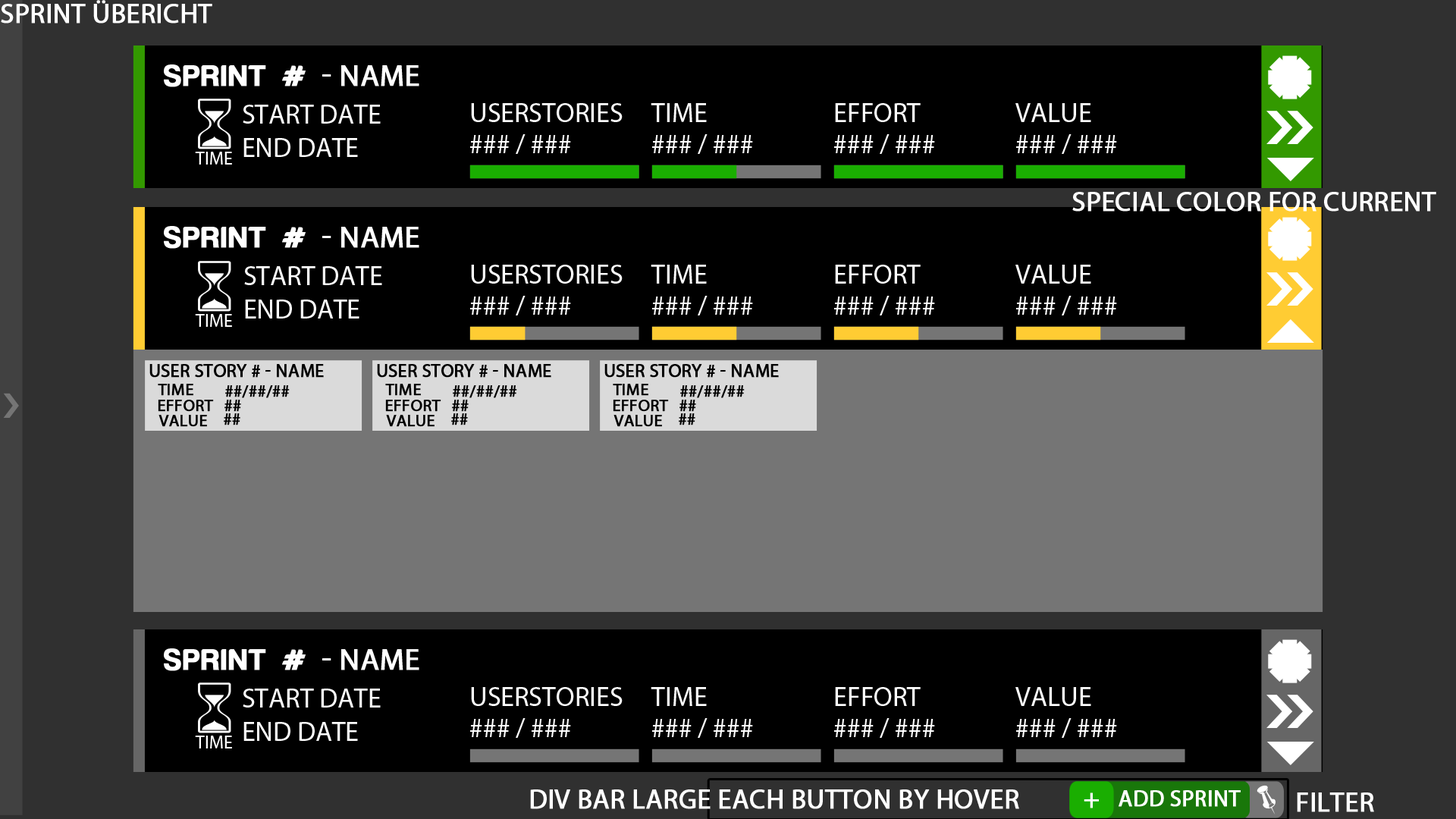
<style>
.page{position:relative;width:1456px;height:819px;background:#000000}
.page>*{position:absolute;margin:0}
.t1{font:27.3px "MyriadPro-Regular";color:#ffffff;text-transform:uppercase;font-weight:bold}
.t2{font:30.3px "HarabaraMaisBold-HarabaraMaisBold";color:#ffffff;text-transform:uppercase;font-weight:bold}
.t3{font:30.3px "MyriadPro-Regular";color:#ffffff;text-transform:uppercase;font-weight:bold}
.t4{font:27.3px/24.8px "MyriadPro-Regular";color:#ffffff;text-transform:uppercase}
.t5{font:27.3px "MyriadPro-Regular";color:#ffffff;text-transform:uppercase}
.t6{font:18.2px "MyriadPro-Regular";color:#ffffff;text-transform:uppercase}
.t7{font:18.2px "MyriadPro-Regular";color:#000000;text-transform:uppercase;font-weight:bold}
.t8{font:16.7px "MyriadPro-Regular";color:#000000;text-transform:uppercase;font-weight:bold}
.t9{font:22.7px "MyriadPro-Regular";color:#ffffff;text-transform:uppercase;font-weight:bold}
</style>
<div class="page">
<p class="t1" style="left:1px;top:0px;width:211px;height:24px">Sprint übericht</p>
<p class="t2" style="left:164px;top:64px;width:255px;height:23px">Sprint # <span class="t3">- Name</span></p>
<p class="t4" style="left:243px;top:105px;width:138px;height:52px">start Date<br>End Date</p>
<p class="t5" style="left:471px;top:103px;width:152px;height:19px">UserStories</p>
<p class="t5" style="left:651px;top:103px;width:56px;height:19px">time</p>
<p class="t5" style="left:835px;top:103px;width:86px;height:19px">Effort</p>
<p class="t5" style="left:1015px;top:103px;width:76px;height:19px">Value</p>
<p class="t5" style="left:470px;top:134px;width:101px;height:20px">### / ###</p>
<p class="t5" style="left:652px;top:134px;width:101px;height:20px">### / ###</p>
<p class="t5" style="left:834px;top:134px;width:101px;height:20px">### / ###</p>
<p class="t5" style="left:1016px;top:134px;width:101px;height:20px">### / ###</p>
<p class="t6" style="left:195px;top:152px;width:37px;height:13px">time</p>
<p class="t1" style="left:1072px;top:192px;width:364px;height:20px">Special color for current</p>
<p class="t2" style="left:164px;top:226px;width:255px;height:23px">Sprint # <span class="t3">- Name</span></p>
<p class="t4" style="left:244px;top:266px;width:138px;height:52px">start Date<br>End Date</p>
<p class="t5" style="left:471px;top:265px;width:152px;height:19px">UserStories</p>
<p class="t5" style="left:651px;top:265px;width:56px;height:19px">time</p>
<p class="t5" style="left:835px;top:265px;width:86px;height:19px">Effort</p>
<p class="t5" style="left:1015px;top:265px;width:76px;height:19px">Value</p>
<p class="t5" style="left:470px;top:296px;width:101px;height:19px">### / ###</p>
<p class="t5" style="left:652px;top:296px;width:101px;height:19px">### / ###</p>
<p class="t5" style="left:834px;top:296px;width:101px;height:19px">### / ###</p>
<p class="t5" style="left:1016px;top:296px;width:101px;height:19px">### / ###</p>
<p class="t6" style="left:195px;top:314px;width:37px;height:13px">time</p>
<p class="t7" style="left:149px;top:364px;width:175px;height:14px">User sTory # - name</p>
<p class="t7" style="left:377px;top:364px;width:174px;height:14px">User sTory # - name</p>
<p class="t7" style="left:604px;top:364px;width:175px;height:14px">User sTory # - name</p>
<p class="t8" style="left:158px;top:384px;width:35px;height:12px">Time</p>
<p class="t8" style="left:225px;top:385px;width:65px;height:13px">##/##/##</p>
<p class="t8" style="left:385px;top:384px;width:36px;height:12px">Time</p>
<p class="t8" style="left:453px;top:385px;width:64px;height:13px">##/##/##</p>
<p class="t8" style="left:613px;top:384px;width:35px;height:12px">Time</p>
<p class="t8" style="left:680px;top:385px;width:65px;height:13px">##/##/##</p>
<p class="t8" style="left:158px;top:400px;width:56px;height:12px">Effort</p>
<p class="t8" style="left:224px;top:400px;width:17px;height:12px">##</p>
<p class="t8" style="left:385px;top:400px;width:56px;height:12px">Effort</p>
<p class="t8" style="left:452px;top:400px;width:17px;height:12px">##</p>
<p class="t8" style="left:613px;top:400px;width:56px;height:12px">Effort</p>
<p class="t8" style="left:679px;top:400px;width:17px;height:12px">##</p>
<p class="t8" style="left:224px;top:413px;width:16px;height:12px">##</p>
<p class="t8" style="left:451px;top:413px;width:17px;height:12px">##</p>
<p class="t8" style="left:679px;top:413px;width:16px;height:12px">##</p>
<p class="t8" style="left:158px;top:415px;width:49px;height:12px">Value</p>
<p class="t8" style="left:386px;top:415px;width:49px;height:12px">Value</p>
<p class="t8" style="left:613px;top:415px;width:49px;height:12px">Value</p>
<p class="t2" style="left:164px;top:648px;width:255px;height:23px">Sprint # <span class="t3">- Name</span></p>
<p class="t4" style="left:243px;top:689px;width:138px;height:52px">start Date<br>End Date</p>
<p class="t5" style="left:471px;top:687px;width:152px;height:19px">UserStories</p>
<p class="t5" style="left:651px;top:687px;width:56px;height:19px">time</p>
<p class="t5" style="left:835px;top:687px;width:86px;height:19px">Effort</p>
<p class="t5" style="left:1015px;top:687px;width:76px;height:19px">Value</p>
<p class="t5" style="left:470px;top:718px;width:101px;height:20px">### / ###</p>
<p class="t5" style="left:652px;top:718px;width:101px;height:20px">### / ###</p>
<p class="t5" style="left:834px;top:718px;width:101px;height:20px">### / ###</p>
<p class="t5" style="left:1016px;top:718px;width:101px;height:20px">### / ###</p>
<p class="t6" style="left:195px;top:736px;width:37px;height:12px">time</p>
<p class="t1" style="left:530px;top:789px;width:489px;height:20px">DIV Bar large each button by hover</p>
<p class="t1" style="left:1084px;top:792px;width:15px;height:16px">+</p>
<p class="t9" style="left:1119px;top:790px;width:122px;height:17px">add Sprint</p>
<p class="t1" style="left:1297px;top:792px;width:77px;height:20px">Filter</p>
</div>
